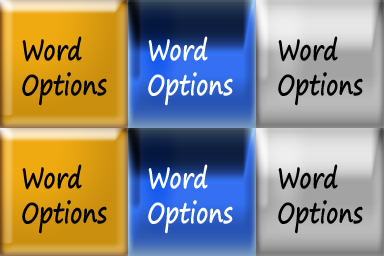
<style>
.page{position:relative;width:384px;height:256px}
.page>*{position:absolute;margin:0}
.t1{font:28.8px "SegoePrint-Bold";color:#000000;scale:0.77 1}
.t2{font:28.8px "SegoePrint-Bold";color:#ffffff;scale:0.77 1}
</style>
<div class="page">
<p class="t1" style="left:22px;top:36px;width:85px;height:70px">Word<br>Options</p>
<p class="t2" style="left:148px;top:36px;width:85px;height:70px">Word<br>Options</p>
<p class="t1" style="left:278px;top:36px;width:85px;height:70px">Word<br>Options</p>
<p class="t1" style="left:22px;top:164px;width:85px;height:70px">Word<br>Options</p>
<p class="t2" style="left:148px;top:164px;width:85px;height:70px">Word<br>Options</p>
<p class="t1" style="left:278px;top:164px;width:85px;height:70px">Word<br>Options</p>
</div>
